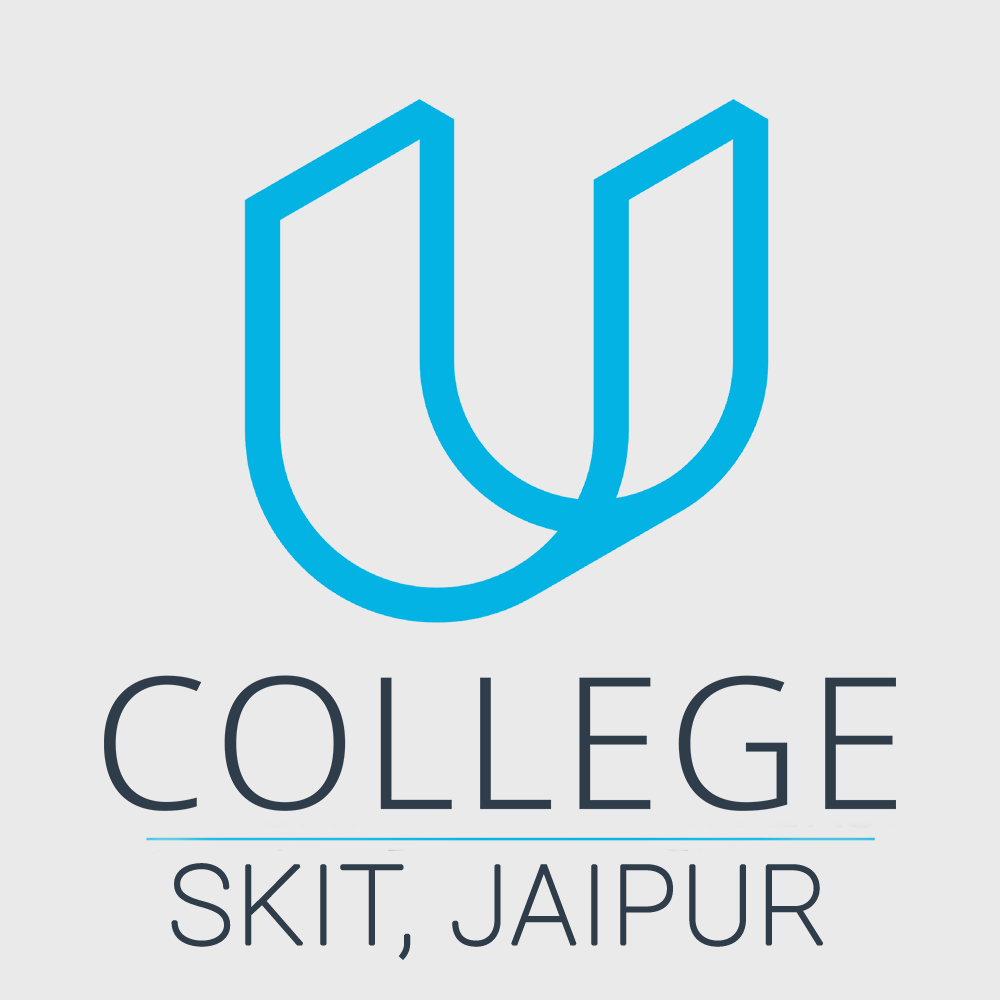
<style>
.page{position:relative;width:1000px;height:1000px;background:#eaeaea}
.page>*{position:absolute;margin:0}
.t1{font:110px "Roboto-Thin";color:#2e3d49;font-weight:bold}
</style>
<div class="page">
<p class="t1" style="left:171px;top:863px;width:652px;height:97px">SKIT, JAIPUR</p>
</div>
